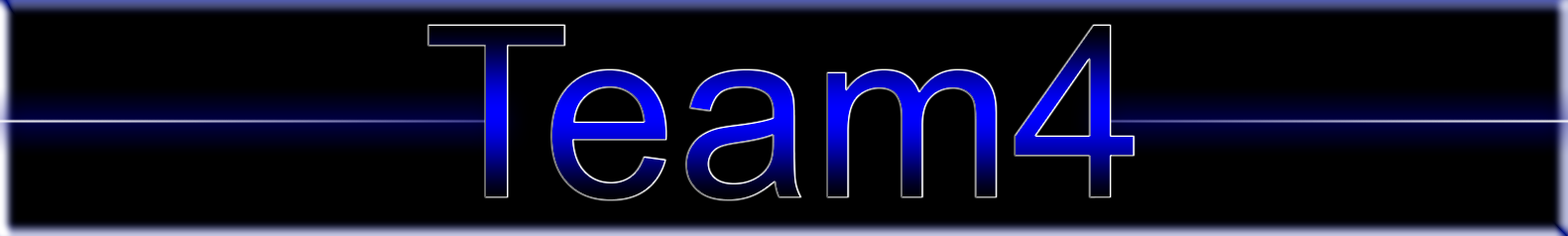
<style>
.page{position:relative;width:1568px;height:236px;background:#000000}
.page>*{position:absolute;margin:0}
.t1{font:241.1px "ArialMT"}
</style>
<div class="page">
<p class="t1" style="left:427px;top:25px;width:708px;height:175px">Team4</p>
</div>
